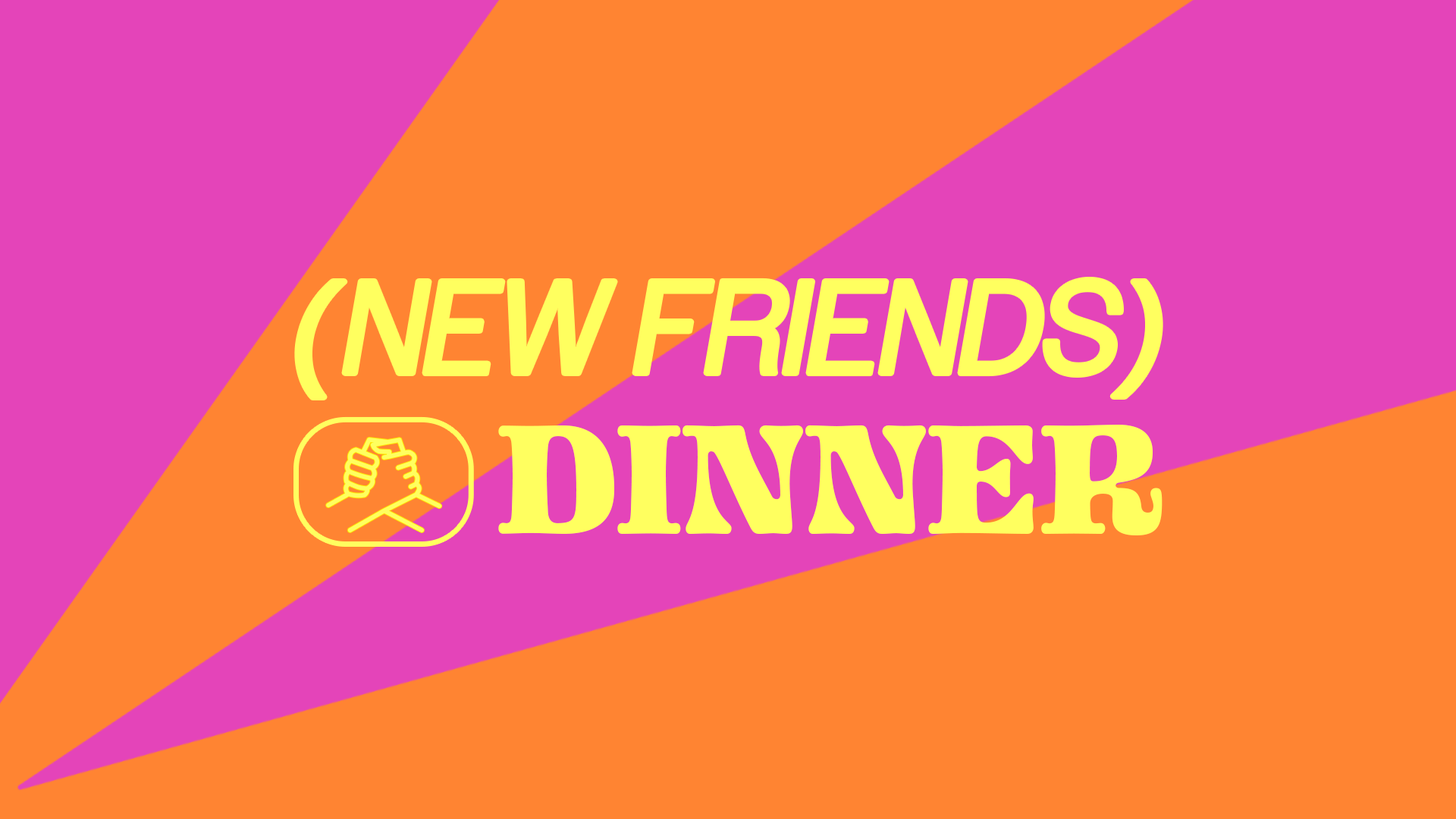
<style>
.page{position:relative;width:1456px;height:819px;background:#ff8432}
.page>*{position:absolute;margin:0}
.t1{font:130.7px "Owners-Regular";letter-spacing:0.03em;color:#ffff5f;text-transform:uppercase;font-style:italic}
.t2{font:130.7px "Owners-Regular";letter-spacing:0.085em;color:#ffff5f;text-transform:uppercase;font-style:italic}
.t3{font:172.4px "OhnoBlazeface-12Point";color:#ffff5f;text-transform:uppercase}
</style>
<div class="page">
<p class="t1" style="left:297px;top:280px;width:863px;height:117px"><span class="t2">(</span>NEW FRIENDS)</p>
<p class="t3" style="left:498px;top:425px;width:665px;height:110px">DINNER</p>
</div>
